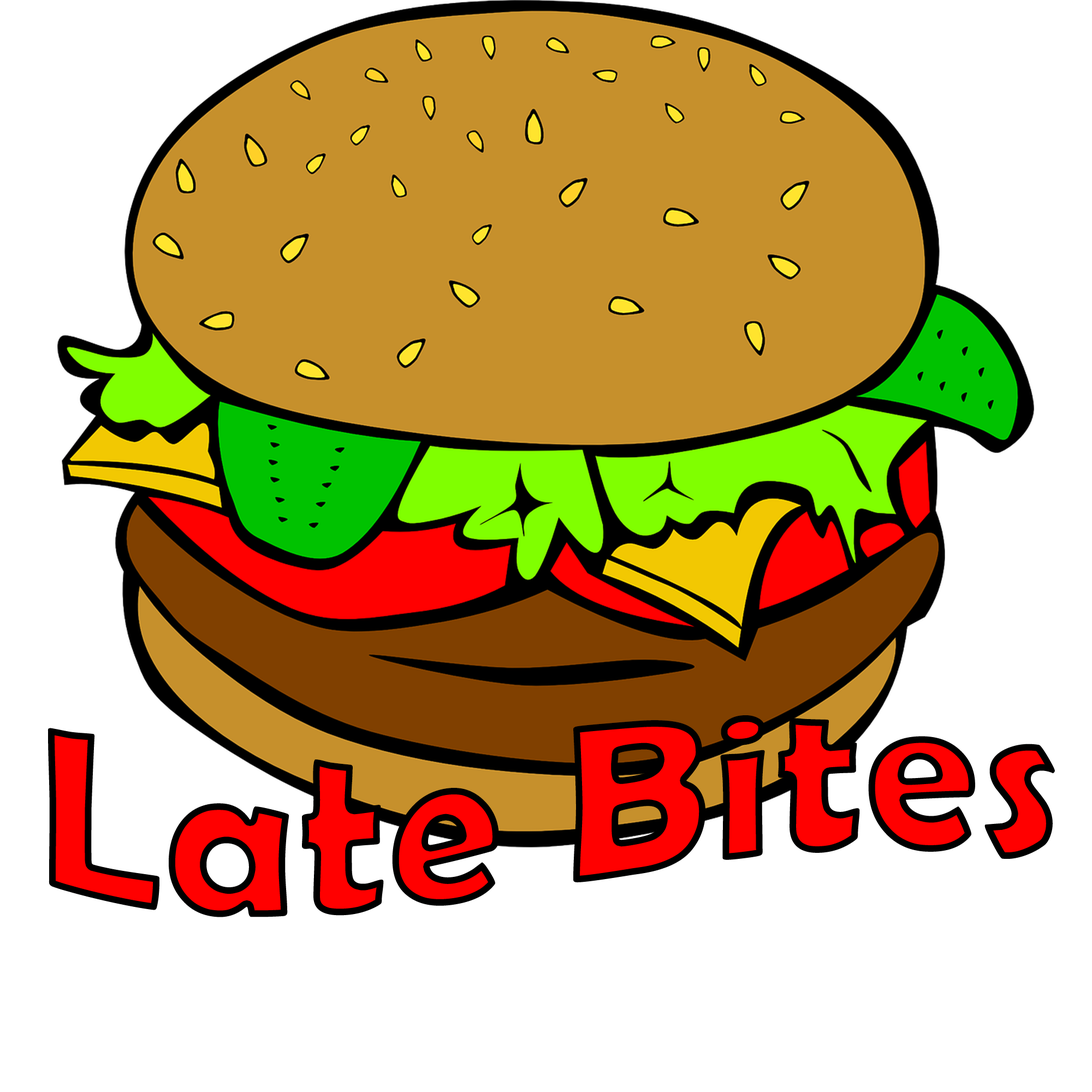
<style>
.page{position:relative;width:1092px;height:1092px;background:#ffffff}
.page>*{position:absolute;margin:0}
.t1{font:227.5px "BerlinSansFBDemi-Bold";letter-spacing:0.01em;color:#ff0000}
</style>
<div class="page">
<p class="t1" style="left:48px;top:715px;width:1007px;height:202px">Late Bites</p>
</div>
